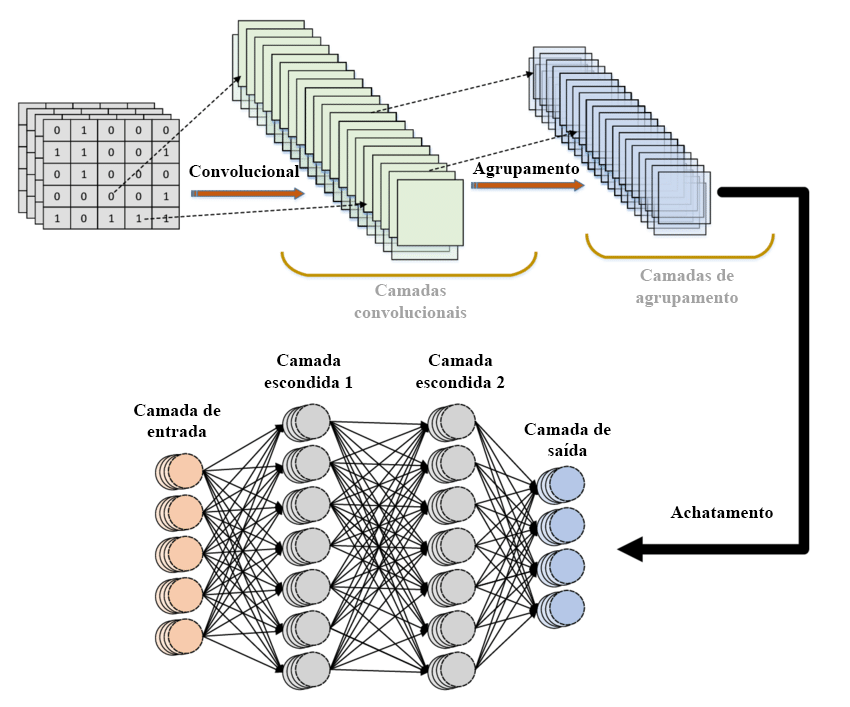
<style>
.page{position:relative;width:850px;height:707px;background:#ffffff}
.page>*{position:absolute;margin:0}
.t1{font:18px "TimesNewRomanPS-BoldMT";color:#000000}
.t2{font:18px "TimesNewRomanPS-BoldMT";color:#a3a3a3}
</style>
<div class="page">
<p class="t1" style="left:189px;top:165px;width:111px;height:12px">Convolucional</p>
<p class="t1" style="left:472px;top:162px;width:108px;height:16px">Agrupamento</p>
<p class="t2" style="left:636px;top:269px;width:102px;height:38px;text-align:center">Camadas de agrupamento</p>
<p class="t2" style="left:354px;top:284px;width:113px;height:34px;text-align:center">Camadas convolucionais</p>
<p class="t1" style="left:264px;top:354px;width:89px;height:34px;text-align:center">Camada escondida 1</p>
<p class="t1" style="left:416px;top:354px;width:89px;height:34px;text-align:center">Camada escondida 2</p>
<p class="t1" style="left:134px;top:404px;width:87px;height:33px;text-align:center">Camada de entrada</p>
<p class="t1" style="left:524px;top:423px;width:87px;height:33px;text-align:center">Camada de saída</p>
<p class="t1" style="left:670px;top:506px;width:103px;height:12px">Achatamento</p>
</div>
